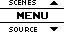
<style>
.page{position:relative;width:64px;height:32px;background:#ffffff}
.page>*{position:absolute;margin:0}
.t1{font:8px "04b03";color:#000000;scale:1.06 1}
.t2{font:14px "ArcadeClassic";color:#000000;scale:1.05 1}
</style>
<div class="page">
<p class="t1" style="left:9px;top:0px;width:27px;height:5px">SCENES</p>
<p class="t2" style="left:17px;top:12px;width:31px;height:7px">MENU</p>
<p class="t1" style="left:9px;top:27px;width:28px;height:5px">SOURCE</p>
</div>
